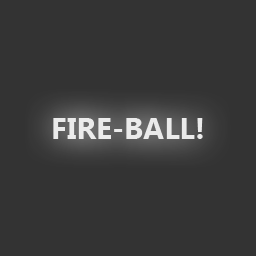
<style>
.page{position:relative;width:256px;height:256px;background:#333333}
.page>*{position:absolute;margin:0}
.t1{font:30px "MicrosoftTaiLe-Bold";color:#ebebeb}
</style>
<div class="page">
<p class="t1" style="left:53px;top:118px;width:150px;height:21px">FIRE-BALL!</p>
</div>
